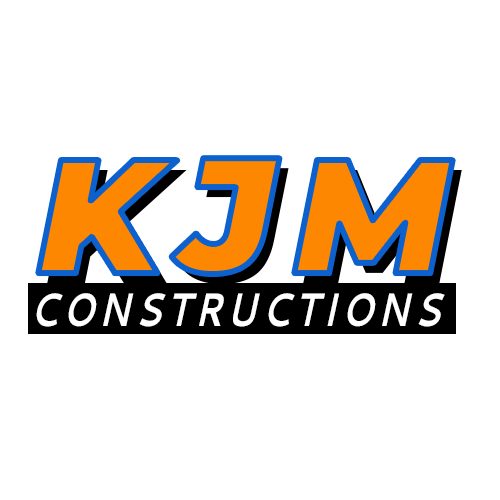
<style>
.page{position:relative;width:500px;height:500px;background:#ffffff}
.page>*{position:absolute;margin:0}
.t1{font:77.7px "Montserrat-BlackItalic";letter-spacing:0.12em;color:#fd8700}
.t2{font:77.7px "Montserrat-BlackItalic";letter-spacing:0.12em}
.t3{font:22.4px "Cantarell-BoldOblique";letter-spacing:0.12em;color:#ffffff;scale:0.77 1}
</style>
<div class="page">
<p class="t1" style="left:38px;top:158px;width:415px;height:116px">KJM</p>
<p class="t2" style="left:47px;top:168px;width:415px;height:116px">KJM</p>
<p class="t3" style="left:36px;top:293px;width:409px;height:34px">CONSTRUCTIONS</p>
</div>
